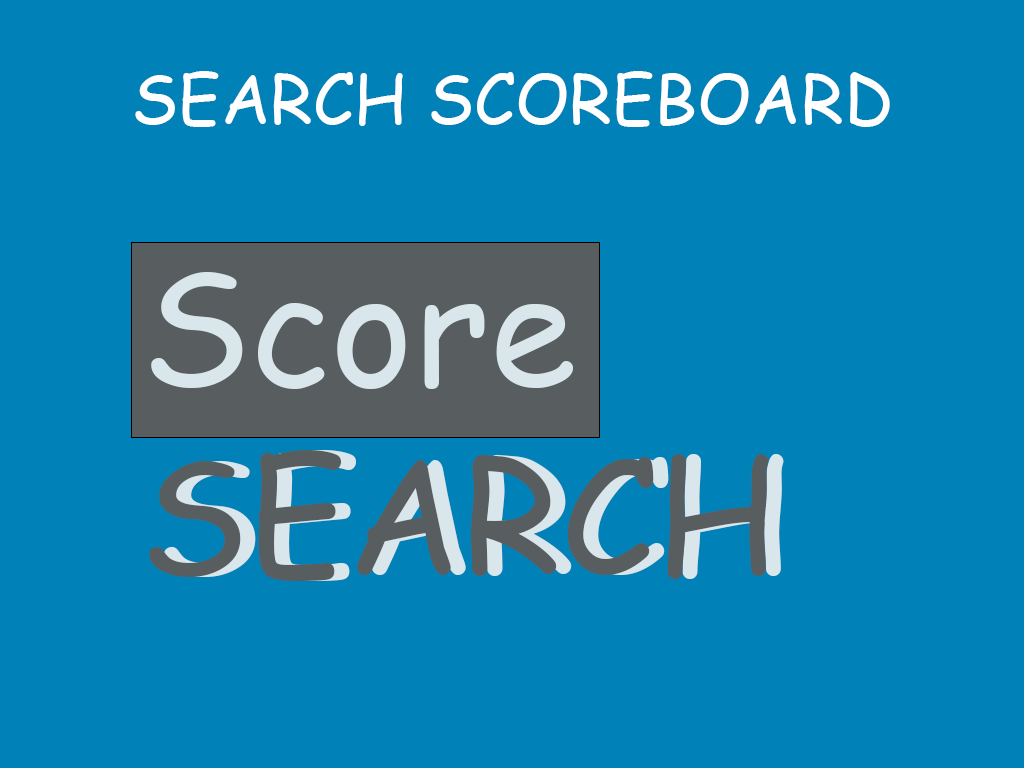
<style>
.page{position:relative;width:1024px;height:768px;background:#0081b8}
.page>*{position:absolute;margin:0}
.t1{font:68px "ComicSansMS";color:#ffffff}
.t2{font:157.4px "ComicSansMS";color:#d9e6eb}
.t3{font:157.4px "ComicSansMS";color:#585e60}
.t4{font:157.4px "ComicSansMS"}
</style>
<div class="page">
<p class="t1" style="left:135px;top:71px;width:755px;height:56px">SEARCH SCOREBOARD</p>
<p class="t2" style="left:151px;top:272px;width:422px;height:117px">Score</p>
<p class="t3" style="left:149px;top:450px;width:620px;height:131px">SEARCH</p>
<p class="t4" style="left:164px;top:450px;width:620px;height:131px">SEARCH</p>
</div>
